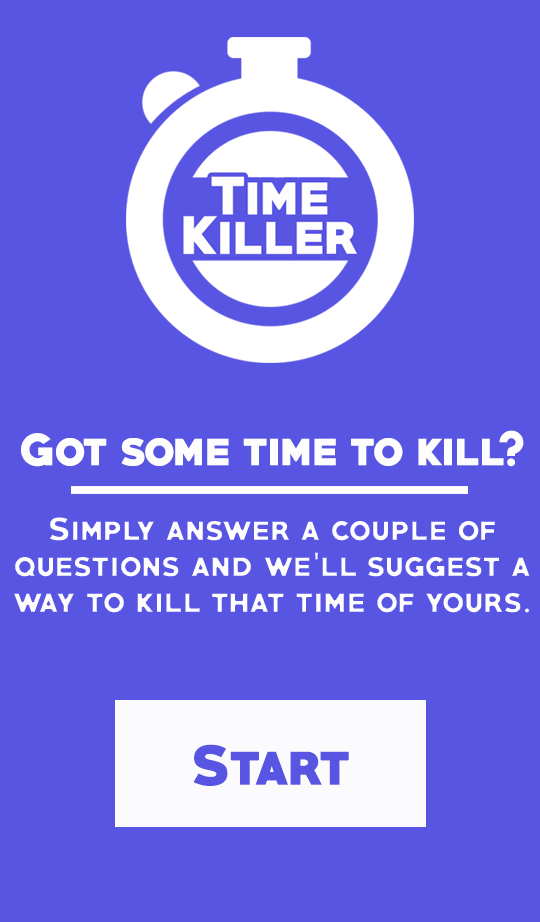
<style>
.page{position:relative;width:540px;height:922px;background:#5955e3}
.page>*{position:absolute;margin:0}
.t1{font:40px "PRIMETIME-Regular";color:#fdfdfd}
.t2{font:30px "PRIMETIME-Regular";color:#fdfdfd}
.t3{font:50px "PRIMETIME-Regular";color:#5955e3}
</style>
<div class="page">
<p class="t1" style="left:21px;top:430px;width:503px;height:37px">Got some time to kill?</p>
<p class="t2" style="left:13px;top:516px;width:518px;height:98px;text-align:center">Simply answer a couple of questions and we’ll suggest a way to kill that time of yours.</p>
<p class="t3" style="left:193px;top:744px;width:156px;height:42px">Start</p>
</div>
